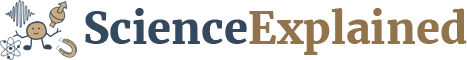
<style>
.page{position:relative;width:467px;height:60px;background:#ffffff}
.page>*{position:absolute;margin:0}
.t1{font:43.3px "Merriweather-Black";color:#91744b}
.t2{font:43.3px "Merriweather-Black";color:#34495e}
</style>
<div class="page">
<p class="t1" style="left:85px;top:8px;width:382px;height:47px"><span class="t2">Science</span>Explained</p>
</div>
